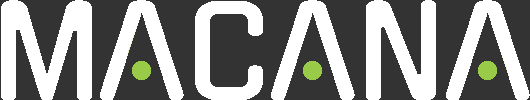
<style>
.page{position:relative;width:530px;height:100px;background:#333333}
.page>*{position:absolute;margin:0}
.t1{font:125px "Gugi-Regular";color:#ffffff}
</style>
<div class="page">
<p class="t1" style="left:1px;top:0px;width:529px;height:101px">MACANA</p>
</div>
